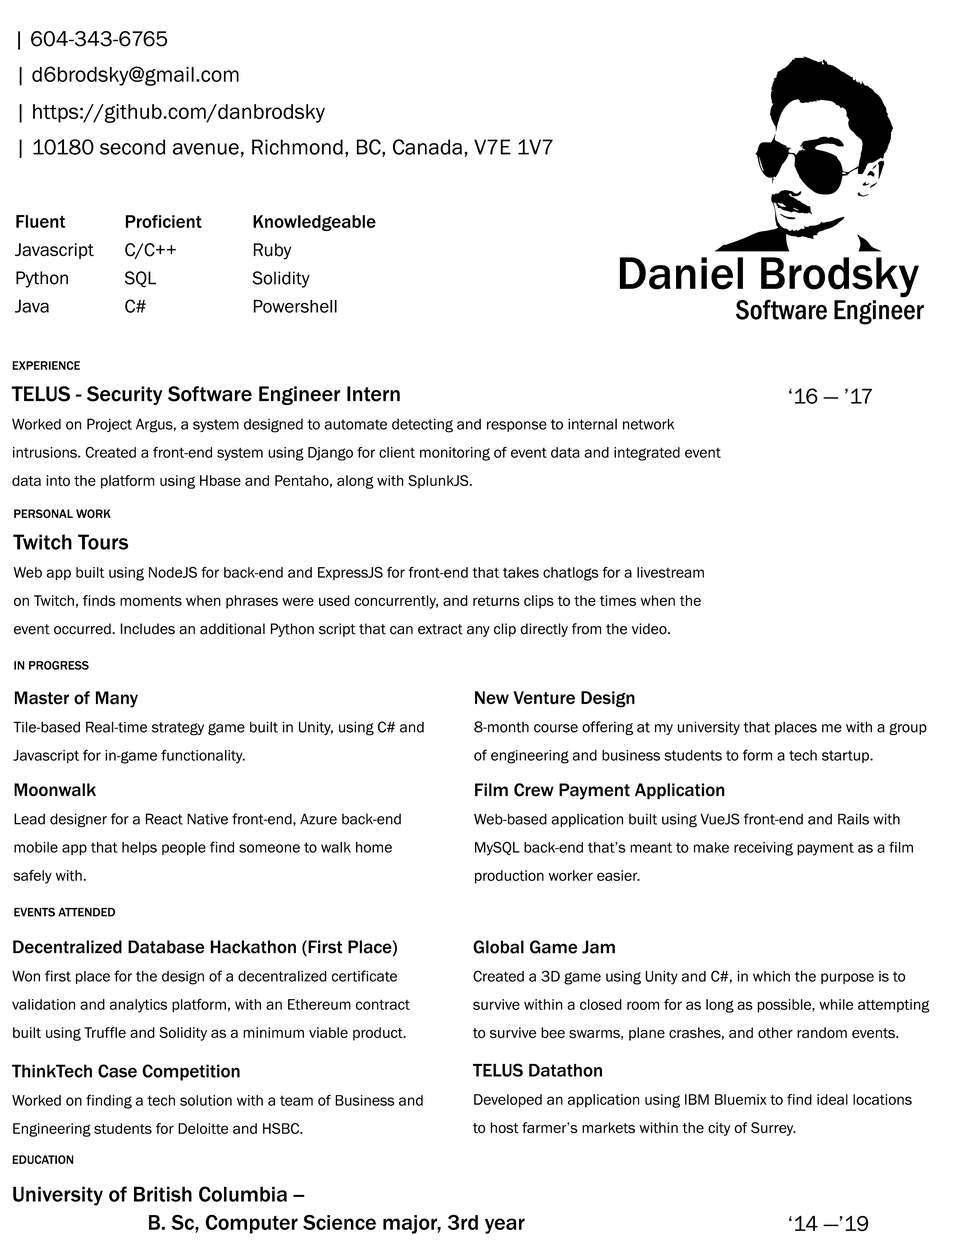
<style>
.page{position:relative;width:960px;height:1242px;background:#ffffff}
.page>*{position:absolute;margin:0}
.t1{font:22px "FranklinGothic-Book";color:#000000}
.t2{font:18.8px/28.2px "FranklinGothic-Book";color:#000000}
.t3{font:18.8px/28.2px "FranklinGothic-Medium";color:#000000}
.t4{font:4.5px/28.2px "FranklinGothic-Book";color:#000000}
.t5{font:4.5px/28.2px "FranklinGothic-Medium";color:#000000}
.t6{font:47.1px "FranklinGothic-Medium";color:#000000}
.t7{font:28.2px "FranklinGothic-MediumCond";color:#000000}
.t8{font:15.7px/28.2px "FranklinGothic-Book";color:#000000}
.t9{font:12.5px/15.7px "FranklinGothic-Medium";color:#000000}
.t10{font:22px/15.7px "FranklinGothic-Medium";color:#000000}
.t11{font:12.5px "FranklinGothic-Medium";color:#000000}
.t12{font:22px/28.2px "FranklinGothic-Medium";color:#000000}
.t13{font:12.5px/37.6px "FranklinGothic-Medium";color:#000000}
.t14{font:22px/37.6px "FranklinGothic-Medium";color:#000000}
</style>
<div class="page">
<p class="t1" style="left:18px;top:31px;width:149px;height:19px">| 604-343-6765</p>
<p class="t1" style="left:20px;top:67px;width:219px;height:19px">| d6brodsky@gmail.com</p>
<p class="t1" style="left:20px;top:104px;width:305px;height:19px">| https://github.com/danbrodsky</p>
<p class="t1" style="left:20px;top:139px;width:533px;height:19px">| 10180 second avenue, Richmond, BC, Canada, V7E 1V7</p>
<p class="t2" style="left:15px;top:215px;width:79px;height:98px"><span class="t3">Fluent<br></span>Javascript<br>Python<br>Java</p>
<p class="t2" style="left:125px;top:215px;width:76px;height:98px"><span class="t3">Proficient<br></span>C/C++<br>SQL<br>C#</p>
<p class="t4" style="left:252px;top:215px;width:124px;height:98px"><span class="t5">Knowledgeable<br></span>Ruby<br>Solidity<br>Powershell</p>
<p class="t6" style="left:620px;top:257px;width:299px;height:40px">Daniel Brodsky</p>
<p class="t7" style="left:736px;top:300px;width:188px;height:24px">Software Engineer</p>
<p class="t8" style="left:12px;top:361px;width:709px;height:128px"><span class="t9">EXPERIENCE<br><br></span><span class="t10">TELUS - Security Software Engineer Intern<br></span>Worked on Project Argus, a system designed to automate detecting and response to internal network <br>intrusions. Created a front-end system using Django for client monitoring of event data and integrated event data into the platform using Hbase and Pentaho, along with SplunkJS.</p>
<p class="t1" style="left:789px;top:388px;width:83px;height:16px">‘16 — ’17</p>
<p class="t8" style="left:13px;top:509px;width:691px;height:128px"><span class="t9">PERSONAL WORK<br><br></span><span class="t10">Twitch Tours <br></span>Web app built using NodeJS for back-end and ExpressJS for front-end that takes chatlogs for a livestream on Twitch, finds moments when phrases were used concurrently, and returns clips to the times when the event occurred. Includes an additional Python script that can extract any clip directly from the video.</p>
<p class="t11" style="left:14px;top:661px;width:75px;height:9px">IN PROGRESS</p>
<p class="t8" style="left:14px;top:691px;width:410px;height:73px"><span class="t3">Master of Many <br></span>Tile-based Real-time strategy game built in Unity, using C# and Javascript for in-game functionality.</p>
<p class="t8" style="left:474px;top:691px;width:452px;height:73px"><span class="t3">New Venture Design<br></span>8-month course offering at my university that places me with a group of engineering and business students to form a tech startup.</p>
<p class="t8" style="left:13px;top:783px;width:388px;height:101px"><span class="t3">Moonwalk<br></span>Lead designer for a React Native front-end, Azure back-end mobile app that helps people find someone to walk home safely with.</p>
<p class="t8" style="left:474px;top:783px;width:439px;height:101px"><span class="t5">Film Crew Payment Application<br></span>Web-based application built using VueJS front-end and Rails with MySQL back-end that’s meant to make receiving payment as a film production worker easier.</p>
<p class="t11" style="left:14px;top:908px;width:101px;height:9px">EVENTS ATTENDED</p>
<p class="t8" style="left:12px;top:941px;width:398px;height:100px"><span class="t3">Decentralized Database Hackathon (First Place)<br></span>Won first place for the design of a decentralized certificate <br>validation and analytics platform, with an Ethereum contract built using Truffle and Solidity as a minimum viable product.</p>
<p class="t8" style="left:473px;top:940px;width:456px;height:101px"><span class="t3">Global Game Jam<br></span>Created a 3D game using Unity and C#, in which the purpose is to survive within a closed room for as long as possible, while attempting to survive bee swarms, plane crashes, and other random events.</p>
<p class="t8" style="left:12px;top:1065px;width:411px;height:72px"><span class="t3">ThinkTech Case Competition<br></span>Worked on finding a tech solution with a team of Business and Engineering students for Deloitte and HSBC.</p>
<p class="t8" style="left:473px;top:1064px;width:439px;height:72px"><span class="t3">TELUS Datathon<br></span>Developed an application using IBM Bluemix to find ideal locations to host farmer’s markets within the city of Surrey.</p>
<p class="t12" style="left:13px;top:1155px;width:512px;height:79px"><span class="t13">EDUCATION<br></span><span class="t14">University of British Columbia --<br></span>          B. Sc, Computer Science major, 3rd year</p>
<p class="t1" style="left:789px;top:1216px;width:79px;height:16px">‘14 —’19</p>
</div>
